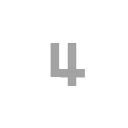
<style>
.page{position:relative;width:128px;height:128px;background:#ffffff}
.page>*{position:absolute;margin:0}
.t1{font:72px "Silkscreen";color:#a3a3a3}
</style>
<div class="page">
<p class="t1" style="left:50px;top:43px;width:35px;height:43px">4</p>
</div>
